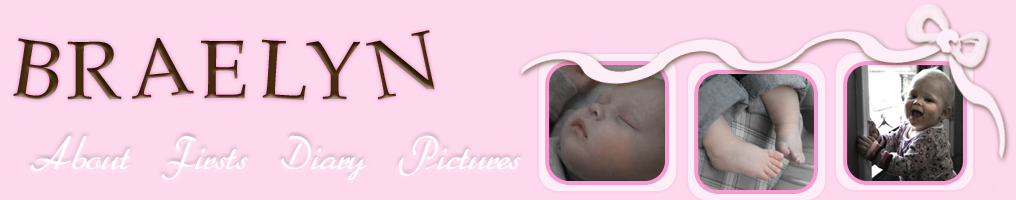
<style>
.page{position:relative;width:1016px;height:200px;background:#fed9ee}
.page>*{position:absolute;margin:0}
.t1{font:33.3px "Heather";color:#ffffff}
</style>
<div class="page">
<p class="t1" style="left:30px;top:135px;width:491px;height:45px">About  Firsts  Diary  Pictures</p>
</div>
